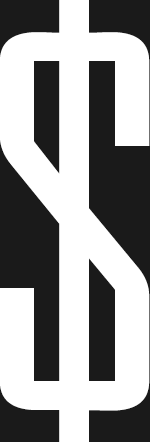
<style>
.page{position:relative;width:150px;height:442px;background:#ffffff}
.page>*{position:absolute;margin:0}
.t1{font:500px "AgencyFB-Reg";color:#ffffff}
</style>
<div class="page">
<p class="t1" style="left:0px;top:0px;width:150px;height:442px">$</p>
</div>
